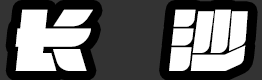
<style>
.page{position:relative;width:262px;height:80px;background:#ffffff}
.page>*{position:absolute;margin:0}
.t1{font:81.8px "zihunqijiyuzhouti_trial";letter-spacing:0.9em;color:#ffffff}
</style>
<div class="page">
<p class="t1" style="left:15px;top:9px;width:233px;height:62px">长沙</p>
</div>
